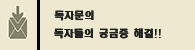
<style>
.page{position:relative;width:195px;height:50px;background:#eee8d0}
.page>*{position:absolute;margin:0}
.t1{font:10px "HeadlineR-HM";color:#1f1f1d}
</style>
<div class="page">
<p class="t1" style="left:54px;top:10px;width:40px;height:11px">독자문의</p>
<p class="t1" style="left:54px;top:10px;width:40px;height:11px">독자문의</p>
<p class="t1" style="left:54px;top:28px;width:107px;height:11px">독자들의 궁금증 해결!!</p>
<p class="t1" style="left:54px;top:28px;width:107px;height:11px">독자들의 궁금증 해결!!</p>
</div>
